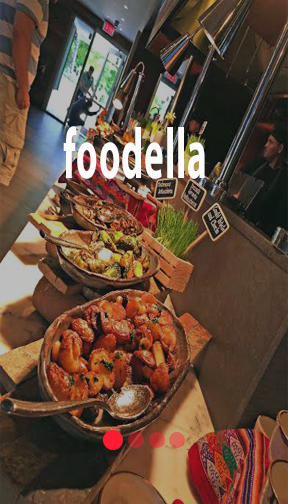
<style>
.page{position:relative;width:288px;height:504px}
.page>*{position:absolute;margin:0}
.t1{font:71.8px "MyriadPro-Bold";letter-spacing:0.025em;color:#fbfbfc;scale:0.52 1}
</style>
<div class="page">
<p class="t1" style="left:63px;top:126px;width:142px;height:53px">foodella</p>
</div>
